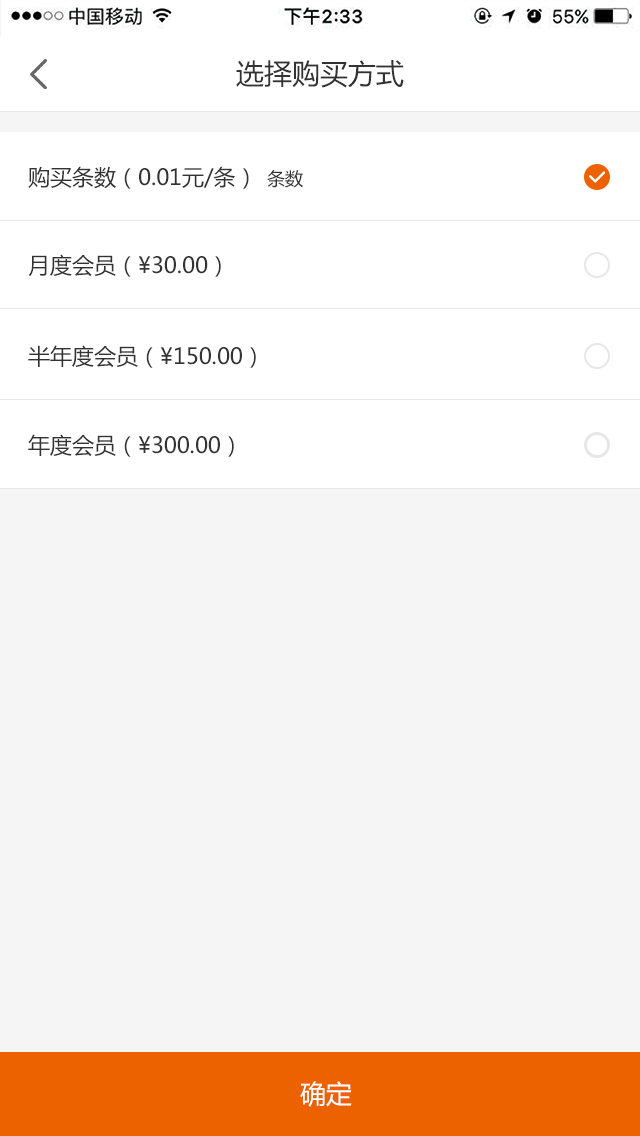
<style>
.page{position:relative;width:640px;height:1136px;background:#f5f5f5}
.page>*{position:absolute;margin:0}
.t1{font:28px "MicrosoftYaHei";color:#333333}
.t2{font:22px "MicrosoftYaHei";color:#333333}
.t3{font:18px "MicrosoftYaHei";color:#333333}
.t4{font:26px "MicrosoftYaHei";color:#ffffff}
</style>
<div class="page">
<p class="t1" style="left:236px;top:60px;width:168px;height:28px">选择购买方式</p>
<p class="t2" style="left:28px;top:166px;width:221px;height:23px">购买条数（0.01元/条）</p>
<p class="t3" style="left:267px;top:170px;width:36px;height:18px">条数</p>
<p class="t2" style="left:28px;top:254px;width:193px;height:23px">月度会员（¥30.00）</p>
<p class="t2" style="left:28px;top:345px;width:228px;height:23px">半年度会员（¥150.00）</p>
<p class="t2" style="left:28px;top:434px;width:206px;height:23px">年度会员（¥300.00）</p>
<p class="t4" style="left:300px;top:1081px;width:52px;height:26px">确定</p>
</div>
